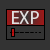
<style>
.page{position:relative;width:50px;height:50px;background:#333333}
.page>*{position:absolute;margin:0}
.t1{font:18px "MyriadPro-Regular";color:#dedede}
</style>
<div class="page">
<p class="t1" style="left:12px;top:11px;width:27px;height:13px">EXP</p>
</div>
